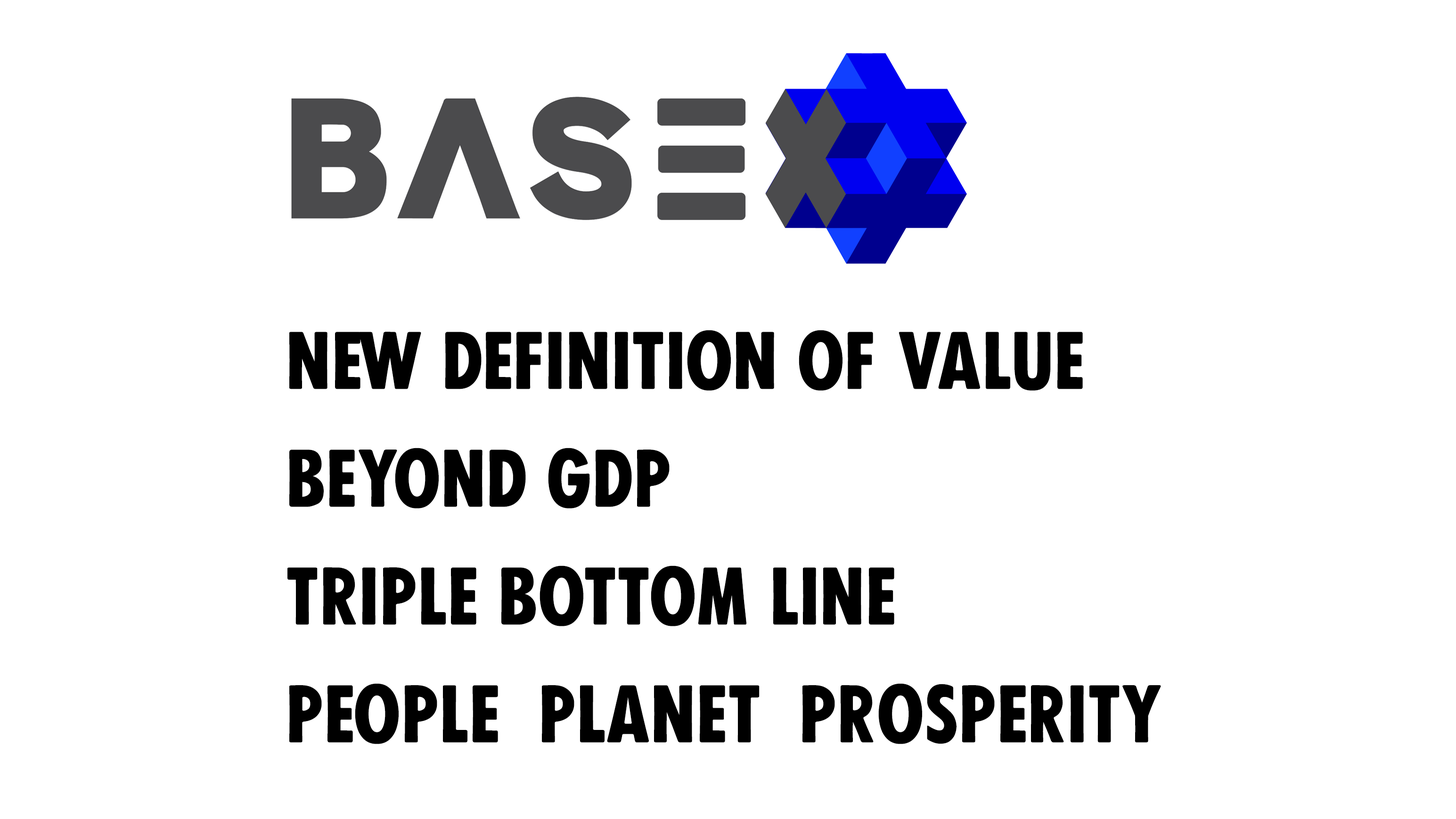
<style>
.page{position:relative;width:1456px;height:819px;background:#ffffff}
.page>*{position:absolute;margin:0}
.t1{font:75.8px/117.7px "FUCXEDCAPSLatin-Regular";color:#000000}
</style>
<div class="page">
<p class="t1" style="left:287px;top:330px;width:874px;height:414px">New definition of value<br>Beyond GDP<br>Triple bottom line<br>People  Planet  Prosperity</p>
</div>
